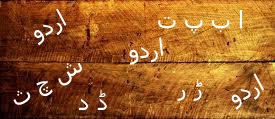
<style>
.page{position:relative;width:275px;height:119px}
.page>*{position:absolute;margin:0}
.t1{font:24px "Tahoma";color:#fefefe}
</style>
<div class="page">
<p class="t1" style="left:34px;top:8px;width:33px;height:38px;rotate:-28deg">ودرا</p>
<p class="t1" style="left:158px;top:10px;width:84px;height:24px">ت پ ب ا</p>
<p class="t1" style="left:129px;top:37px;width:35px;height:28px;rotate:-7deg">ودرا</p>
<p class="t1" style="left:13px;top:62px;width:69px;height:43px;rotate:-29deg">ث چ ش</p>
<p class="t1" style="left:231px;top:73px;width:33px;height:37px;rotate:-28deg">ودرا</p>
<p class="t1" style="left:79px;top:89px;width:28px;height:21px">د ڈ</p>
<p class="t1" style="left:177px;top:79px;width:26px;height:22px">ر ڑ</p>
</div>
